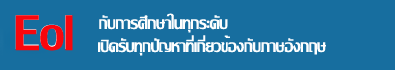
<style>
.page{position:relative;width:395px;height:70px;background:#176e9f}
.page>*{position:absolute;margin:0}
.t1{font:71.7px "LilyUPC";color:#fa060c}
.t2{font:74.5px "LilyUPC";color:#fa060c;scale:0.97 1}
.t3{font:24px "LilyUPC";color:#fdfefe}
</style>
<div class="page">
<p class="t1" style="left:15px;top:15px;width:57px;height:35px">Eol</p>
<p class="t2" style="left:15px;top:15px;width:58px;height:36px">Eol</p>
<p class="t3" style="left:99px;top:13px;width:129px;height:20px">กับการศึกษาในทุกระดับ</p>
<p class="t3" style="left:98px;top:35px;width:228px;height:21px">เปิดรับทุกปัญหาที่เกี่ยวข้องกับภาษอังกฤษ</p>
</div>
